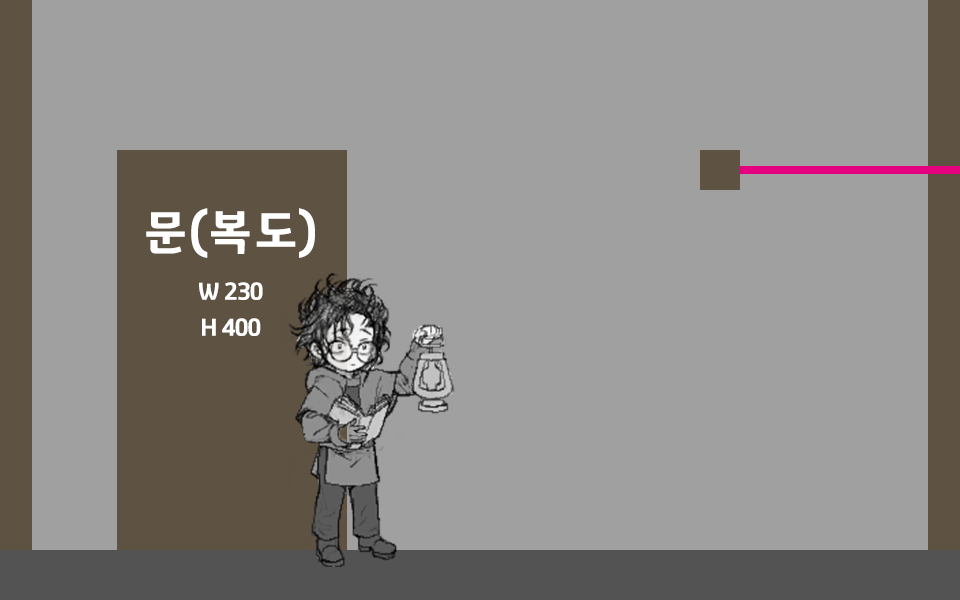
<style>
.page{position:relative;width:960px;height:600px;background:#a0a0a0}
.page>*{position:absolute;margin:0}
.t1{font:24px/36px "GyeonggiTitleV";letter-spacing:-0.05em;color:#ffffff}
.t2{font:48px/36px "GyeonggiTitleV";letter-spacing:-0.05em;color:#ffffff}
</style>
<div class="page">
<p class="t1" style="left:146px;top:208px;width:169px;height:128px;text-align:center"><span class="t2">문(복도)<br><br></span>W 230<br>H 400</p>
</div>
